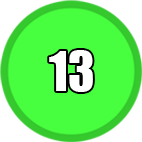
<style>
.page{position:relative;width:142px;height:142px;background:#47ff3e}
.page>*{position:absolute;margin:0}
.t1{font:50px "Impact";color:#ffffff}
</style>
<div class="page">
<p class="t1" style="left:49px;top:50px;width:44px;height:42px">13</p>
</div>
